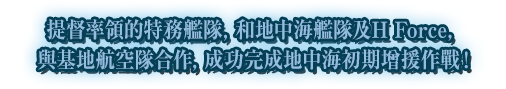
<style>
.page{position:relative;width:506px;height:89px}
.page>*{position:absolute;margin:0}
.t1{font:22px/30px "RyuminPro-ExBold";color:#93bee0;scale:0.9 1}
</style>
<div class="page">
<p class="t1" style="left:38px;top:19px;width:430px;height:52px;text-align:center">提督率領的特務艦隊，和地中海艦隊及H Force，<br>與基地航空隊合作，成功完成地中海初期增援作戰！</p>
</div>
